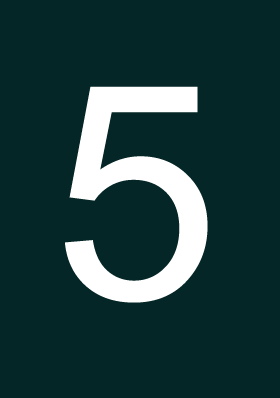
<style>
.page{position:relative;width:280px;height:398px;background:#052626}
.page>*{position:absolute;margin:0}
.t1{font:300px "ArialMT";color:#ffffff}
</style>
<div class="page">
<p class="t1" style="left:65px;top:86px;width:143px;height:217px">5</p>
</div>
